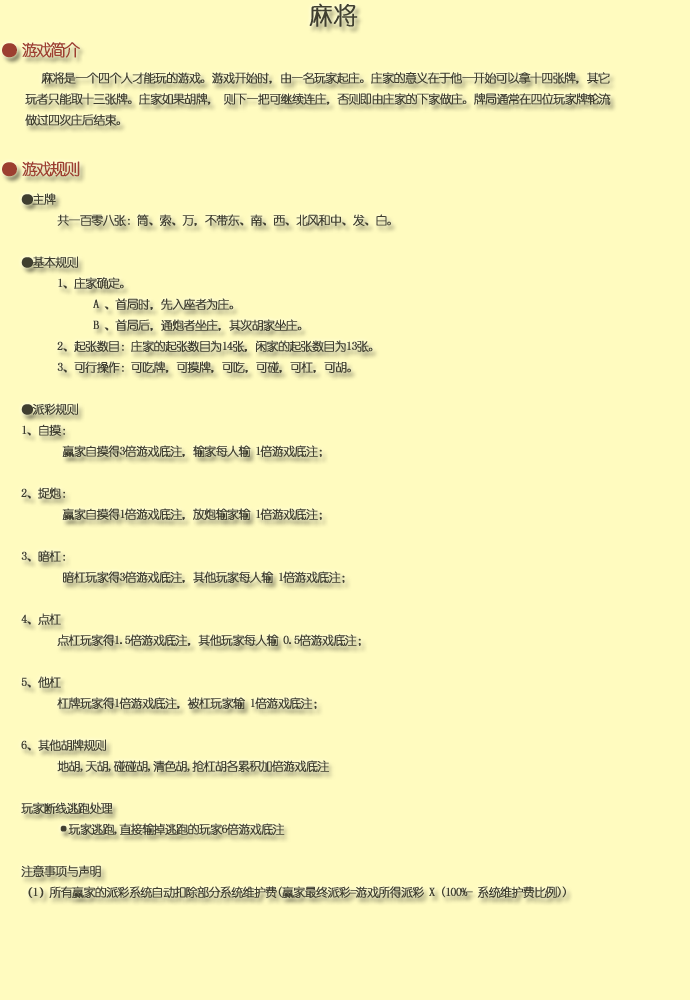
<style>
.page{position:relative;width:690px;height:1000px;background:#fffbbf}
.page>*{position:absolute;margin:0}
.t1{font:24px "YouYuan";color:#403f30;font-weight:bold}
.t2{font:16px "YouYuan";letter-spacing:-0.14em;color:#9c3f30;font-weight:bold}
.t3{font:12px "YouYuan";letter-spacing:-0.08em;color:#403f30;font-weight:bold}
</style>
<div class="page">
<p class="t1" style="left:309px;top:3px;width:49px;height:24px">麻将</p>
<p class="t2" style="left:2px;top:42px;width:78px;height:16px">● 游戏简介</p>
<p class="t3" style="left:25px;top:72px;width:586px;height:54px">麻将是一个四个人才能玩的游戏。游戏开始时，由一名玩家起庄。庄家的意义在于他一开始可以拿十四张牌，其它<br>玩者只能取十三张牌。庄家如果胡牌， 则下一把可继续连庄，否则即由庄家的下家做庄。牌局通常在四位玩家牌轮流<br>做过四次庄后结束。</p>
<p class="t2" style="left:2px;top:161px;width:78px;height:16px">● 游戏规则</p>
<p class="t3" style="left:21px;top:193px;width:545px;height:705px">●主牌<br> 共一百零八张：筒、索、万，不带东、南、西、北风和中、发、白。 <br><br>●基本规则 <br> 1、庄家确定。<br>  A 、首局时，先入座者为庄。 <br>  B 、首局后，通炮者坐庄，其次胡家坐庄。<br> 2、起张数目：庄家的起张数目为14张，闲家的起张数目为13张。<br> 3、可行操作：可吃牌，可摸牌，可吃，可碰，可杠，可胡。<br> <br>●派彩规则<br>1、自摸：<br>  赢家自摸得3倍游戏底注，输家每人输 1倍游戏底注；<br><br>2、捉炮：<br>  赢家自摸得1倍游戏底注，放炮输家输 1倍游戏底注；<br><br>3、暗杠：<br>  暗杠玩家得3倍游戏底注，其他玩家每人输 1倍游戏底注；<br><br>4、点杠<br> 点杠玩家得1.5倍游戏底注，其他玩家每人输 0.5倍游戏底注；<br><br>5、他杠<br> 杠牌玩家得1倍游戏底注，被杠玩家输 1倍游戏底注；<br> <br>6、其他胡牌规则<br> 地胡,天胡,碰碰胡,清色胡,抢杠胡各累积加倍游戏底注<br> <br>玩家断线逃跑处理<br> ·玩家逃跑,直接输掉逃跑的玩家6倍游戏底注<br><br>注意事项与声明<br>（1）所有赢家的派彩系统自动扣除部分系统维护费(赢家最终派彩=游戏所得派彩 X (100%- 系统维护费比例))</p>
</div>
